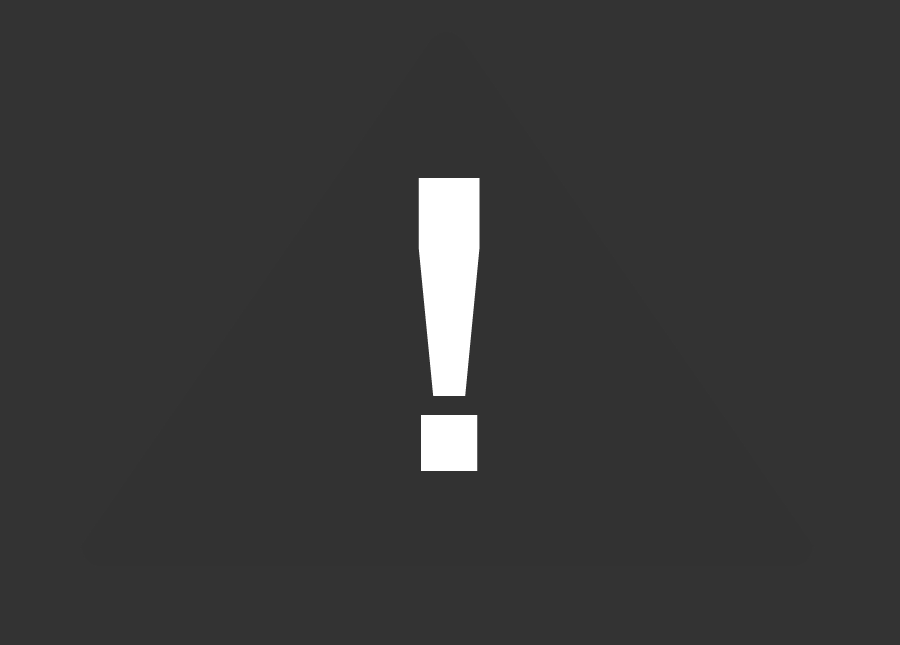
<style>
.page{position:relative;width:900px;height:645px;background:#333333}
.page>*{position:absolute;margin:0}
.t1{font:409px "Arial-BoldMT";color:#ffffff}
</style>
<div class="page">
<p class="t1" style="left:418px;top:178px;width:62px;height:293px">!</p>
</div>
